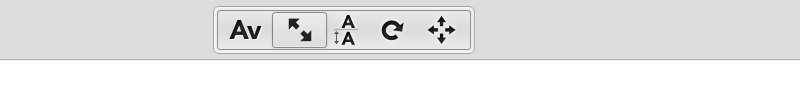
<style>
.page{position:relative;width:800px;height:100px;background:#dddddd}
.page>*{position:absolute;margin:0}
.t1{font:18.3px/16.8px "AvenirLTStd-Black";color:#1b1b1b}
.t2{font:26.2px "AvenirLTStd-Black";color:#333333}
</style>
<div class="page">
<p class="t1" style="left:341px;top:15px;width:14px;height:30px">A<br>A</p>
<p class="t2" style="left:229px;top:20px;width:33px;height:19px">Av</p>
</div>
